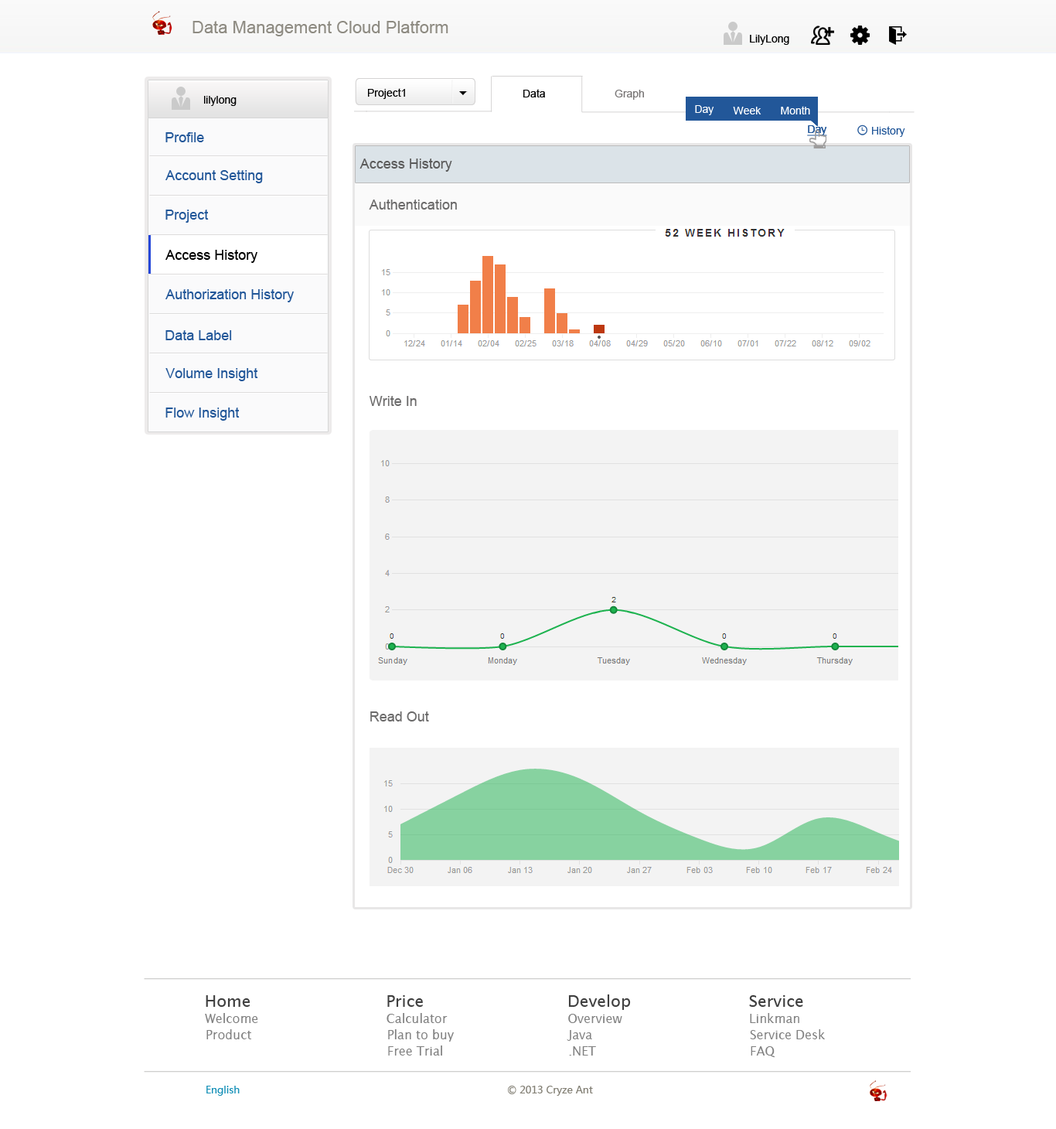
<style>
.page{position:relative;width:1056px;height:1129px;background:#ffffff}
.page>*{position:absolute;margin:0}
.t1{font:17px "ArialMT";color:#8e8b82}
.t2{font:10.8px "ArialMT";color:#000000}
.t3{font:10.8px "ArialMT"}
.t4{font:10.8px "ArialMT";color:#797676}
.t5{font:10.8px "ArialMT";color:#ffffff}
.t6{font:10.8px "ArialMT";color:#225799;text-decoration:underline}
.t7{font:10.8px "ArialMT";color:#225799}
.t8{font:13.9px "ArialMT";color:#225799}
.t9{font:13.9px "ArialMT";color:#5b5b5b}
.t10{font:13.9px "ArialMT";color:#6c6b6b}
.t11{font:13.9px "ArialMT";color:#000000}
.t12{font:16.2px "LucidaSans";color:#404040}
.t13{font:16.2px "LucidaSans";color:#3f3f3f}
.t14{font:12.4px "LucidaSans";color:#818181}
.t15{font:10.1px "MicrosoftYaHei";color:#1791b8}
.t16{font:10.1px "MicrosoftYaHei";color:#827f74}
</style>
<div class="page">
<p class="t1" style="left:193px;top:21px;width:255px;height:15px">Data Management Cloud Platform</p>
<p class="t2" style="left:750px;top:35px;width:39px;height:10px">LilyLong</p>
<p class="t3" style="left:368px;top:87px;width:37px;height:11px">Project1</p>
<p class="t2" style="left:368px;top:88px;width:37px;height:11px">Project1</p>
<p class="t2" style="left:523px;top:89px;width:22px;height:8px">Data</p>
<p class="t4" style="left:615px;top:90px;width:29px;height:10px">Graph</p>
<p class="t2" style="left:204px;top:96px;width:33px;height:10px">lilylong</p>
<p class="t5" style="left:695px;top:105px;width:19px;height:10px">Day</p>
<p class="t5" style="left:733px;top:107px;width:29px;height:7px">Week</p>
<p class="t5" style="left:781px;top:106px;width:29px;height:8px">Month</p>
<p class="t6" style="left:807px;top:125px;width:20px;height:11px">Day</p>
<p class="t7" style="left:808px;top:125px;width:19px;height:10px">Day</p>
<p class="t8" style="left:165px;top:132px;width:39px;height:10px">Profile</p>
<p class="t7" style="left:872px;top:126px;width:33px;height:11px">History</p>
<p class="t9" style="left:360px;top:159px;width:92px;height:13px">Access History</p>
<p class="t8" style="left:165px;top:170px;width:98px;height:13px">Account Setting</p>
<p class="t8" style="left:165px;top:210px;width:44px;height:13px">Project</p>
<p class="t10" style="left:369px;top:199px;width:88px;height:11px">Authentication</p>
<p class="t11" style="left:165px;top:250px;width:92px;height:13px">Access History</p>
<p class="t8" style="left:165px;top:289px;width:129px;height:13px">Authorization History</p>
<p class="t8" style="left:165px;top:330px;width:67px;height:10px">Data Label</p>
<p class="t8" style="left:165px;top:368px;width:93px;height:13px">Volume Insight</p>
<p class="t10" style="left:370px;top:396px;width:47px;height:10px">Write In</p>
<p class="t8" style="left:165px;top:407px;width:75px;height:14px">Flow Insight</p>
<p class="t10" style="left:370px;top:711px;width:59px;height:10px">Read Out</p>
<p class="t12" style="left:206px;top:995px;width:45px;height:12px">Home</p>
<p class="t13" style="left:387px;top:995px;width:36px;height:12px">Price</p>
<p class="t12" style="left:568px;top:994px;width:63px;height:16px">Develop</p>
<p class="t13" style="left:749px;top:995px;width:54px;height:12px">Service</p>
<p class="t14" style="left:205px;top:1013px;width:53px;height:10px">Welcome</p>
<p class="t14" style="left:387px;top:1013px;width:61px;height:10px">Calculator</p>
<p class="t14" style="left:568px;top:1014px;width:54px;height:9px">Overview</p>
<p class="t14" style="left:750px;top:1013px;width:50px;height:10px">Linkman</p>
<p class="t14" style="left:206px;top:1029px;width:45px;height:10px">Product</p>
<p class="t14" style="left:388px;top:1029px;width:66px;height:13px">Plan to buy</p>
<p class="t14" style="left:567px;top:1030px;width:25px;height:11px">Java</p>
<p class="t14" style="left:750px;top:1029px;width:75px;height:10px">Service Desk</p>
<p class="t14" style="left:388px;top:1045px;width:54px;height:10px">Free Trial</p>
<p class="t14" style="left:569px;top:1046px;width:27px;height:9px">.NET</p>
<p class="t14" style="left:751px;top:1046px;width:25px;height:12px">FAQ</p>
<p class="t15" style="left:206px;top:1086px;width:34px;height:10px">English</p>
<p class="t16" style="left:508px;top:1086px;width:85px;height:10px">© 2013 Cryze Ant</p>
</div>
